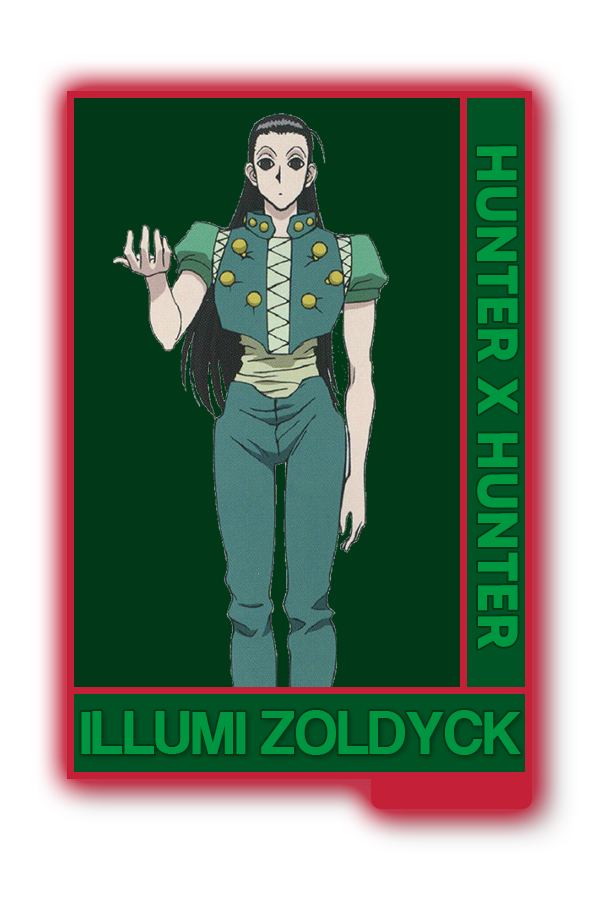
<style>
.page{position:relative;width:600px;height:900px;background:#003818}
.page>*{position:absolute;margin:0}
.t1{font:56.5px "MADETOMMY-Bold";color:#009741}
.t2{font:62.7px "CoolveticaRg-Regular";color:#009641}
</style>
<div class="page">
<p class="t1" style="left:476px;top:146px;width:42px;height:503px;rotate:90deg">HUNTER X HUNTER</p>
<p class="t2" style="left:81px;top:710px;width:440px;height:45px">ILLUMI ZOLDYCK</p>
</div>
